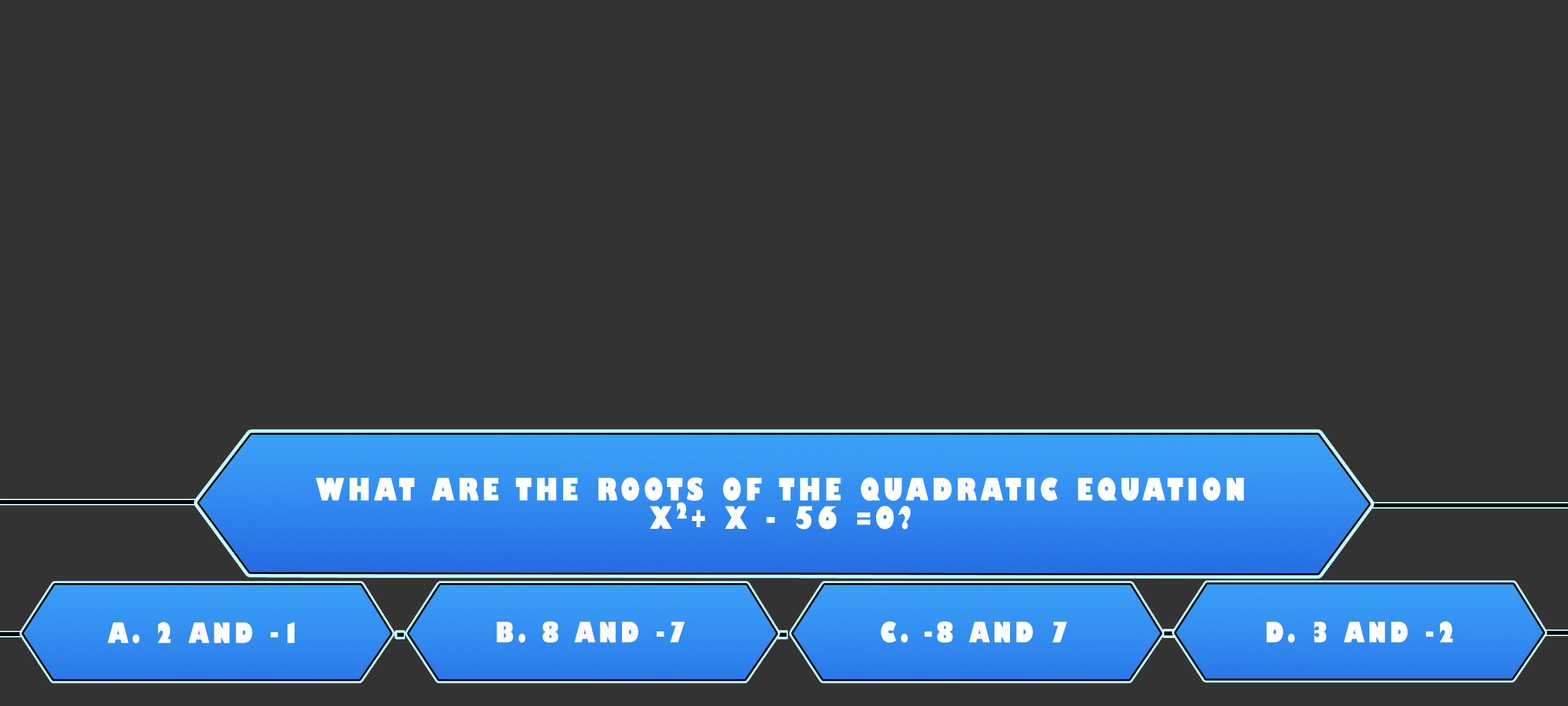
<style>
.page{position:relative;width:1568px;height:706px;background:#333333}
.page>*{position:absolute;margin:0}
.t1{font:30px/28.4px "GillSans-UltraBoldCondensed";letter-spacing:0.115em;color:#ffffff;text-transform:uppercase;scale:1.12 1}
.t2{font:21.1px "GillSans-UltraBoldCondensed";letter-spacing:0.115em;color:#ffffff;text-transform:uppercase;scale:1.11 1}
.t3{font:27.2px "GillSans-UltraBoldCondensed";letter-spacing:0.115em;color:#fdfdfd;text-transform:uppercase;scale:1.12 1}
.t4{font:27.2px "GillSans-UltraBoldCondensed";letter-spacing:0.115em;color:#fcf9f9;text-transform:uppercase;scale:1.12 1}
.t5{font:27.2px "GillSans-UltraBoldCondensed";letter-spacing:0.115em;color:#fdfcfc;text-transform:uppercase;scale:1.12 1}
.t6{font:27.2px "GillSans-UltraBoldCondensed";letter-spacing:0.115em;color:#fffdfd;text-transform:uppercase;scale:1.12 1}
</style>
<div class="page">
<p class="t1" style="left:316px;top:477px;width:928px;height:52px;text-align:center">What are the roots of the quadratic equation<br>x + x - 56 =0?</p>
<p class="t2" style="left:676px;top:502px;width:11px;height:17px">2</p>
<p class="t3" style="left:108px;top:621px;width:187px;height:22px">A. 2 and -1</p>
<p class="t4" style="left:497px;top:621px;width:188px;height:21px">B. 8 and -7</p>
<p class="t5" style="left:881px;top:621px;width:187px;height:21px">C. -8 and 7</p>
<p class="t6" style="left:1266px;top:621px;width:187px;height:21px">D. 3 and -2</p>
</div>
